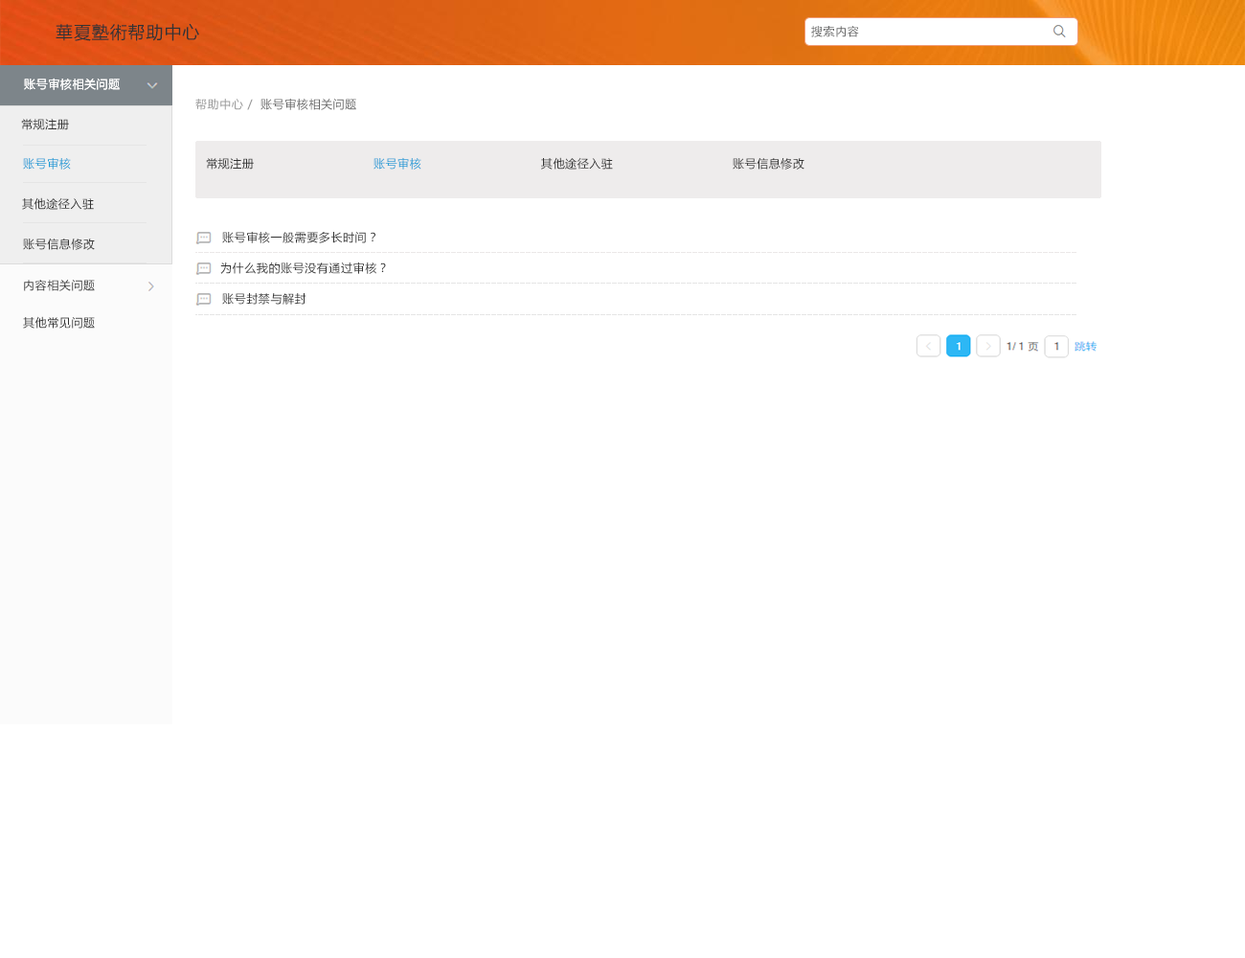
<style>
.page{position:relative;width:1245px;height:958px;background:#ffffff}
.page>*{position:absolute;margin:0}
.t1{font:17.2px "MicrosoftYaHei";letter-spacing:0.05em;color:#333333}
.t2{font:11.5px "MicrosoftYaHei";letter-spacing:0.05em;color:#666666}
.t3{font:11.5px "MicrosoftYaHei";letter-spacing:0.05em;color:#ffffff}
.t4{font:11.5px "MicrosoftYaHei";letter-spacing:0.05em;color:#999999}
.t5{font:11.5px "MicrosoftYaHei";letter-spacing:0.05em;color:#333333}
.t6{font:11.5px "MicrosoftYaHei";letter-spacing:0.05em;color:#1b9cd6}
</style>
<div class="page">
<p class="t1" style="left:56px;top:23px;width:143px;height:18px">華夏塾術帮助中心</p>
<p class="t2" style="left:811px;top:26px;width:48px;height:11px">搜索内容</p>
<p class="t3" style="left:24px;top:78px;width:96px;height:12px">账号审核相关问题</p>
<p class="t3" style="left:24px;top:78px;width:96px;height:12px">账号审核相关问题</p>
<p class="t4" style="left:195px;top:99px;width:58px;height:11px">帮助中心 /</p>
<p class="t2" style="left:261px;top:98px;width:95px;height:12px">账号审核相关问题</p>
<p class="t5" style="left:21px;top:119px;width:48px;height:11px">常规注册</p>
<p class="t6" style="left:23px;top:157px;width:48px;height:13px">账号审核</p>
<p class="t5" style="left:206px;top:157px;width:598px;height:13px">常规注册                              <span class="t6">账号审核</span>                              其他途径入驻                              账号信息修改</p>
<p class="t5" style="left:22px;top:197px;width:72px;height:13px">其他途径入驻</p>
<p class="t5" style="left:222px;top:231px;width:153px;height:12px">账号审核一般需要多长时间？</p>
<p class="t5" style="left:23px;top:238px;width:72px;height:12px">账号信息修改</p>
<p class="t5" style="left:220px;top:261px;width:166px;height:13px">为什么我的账号没有通过审核？</p>
<p class="t5" style="left:24px;top:280px;width:71px;height:11px">内容相关问题</p>
<p class="t5" style="left:222px;top:293px;width:84px;height:12px">账号封禁与解封</p>
<p class="t5" style="left:23px;top:316px;width:72px;height:13px">其他常见问题</p>
</div>
